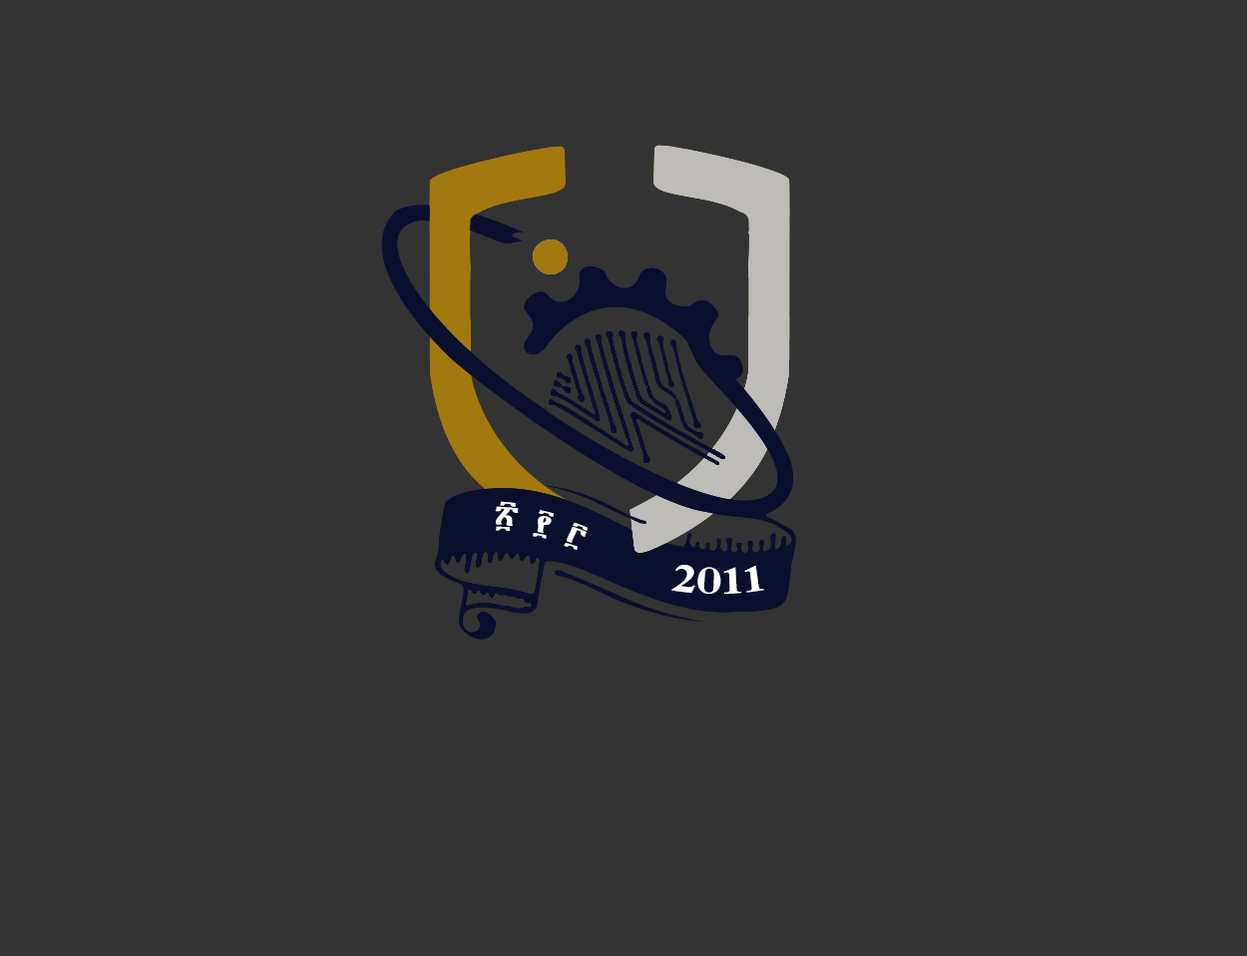
<style>
.page{position:relative;width:1247px;height:956px;background:#333333}
.page>*{position:absolute;margin:0}
.t1{font:35.3px "AbyssinicaSIL-Regular";color:#ffffff}
.t2{font:37.4px "TimesNewRomanPS-BoldMT";color:#ffffff;scale:1.2 1}
</style>
<div class="page">
<p class="t1" style="left:495px;top:501px;width:93px;height:49px;rotate:16deg">፳ ፻ ፫</p>
<p class="t2" style="left:672px;top:565px;width:92px;height:29px">2011</p>
</div>
